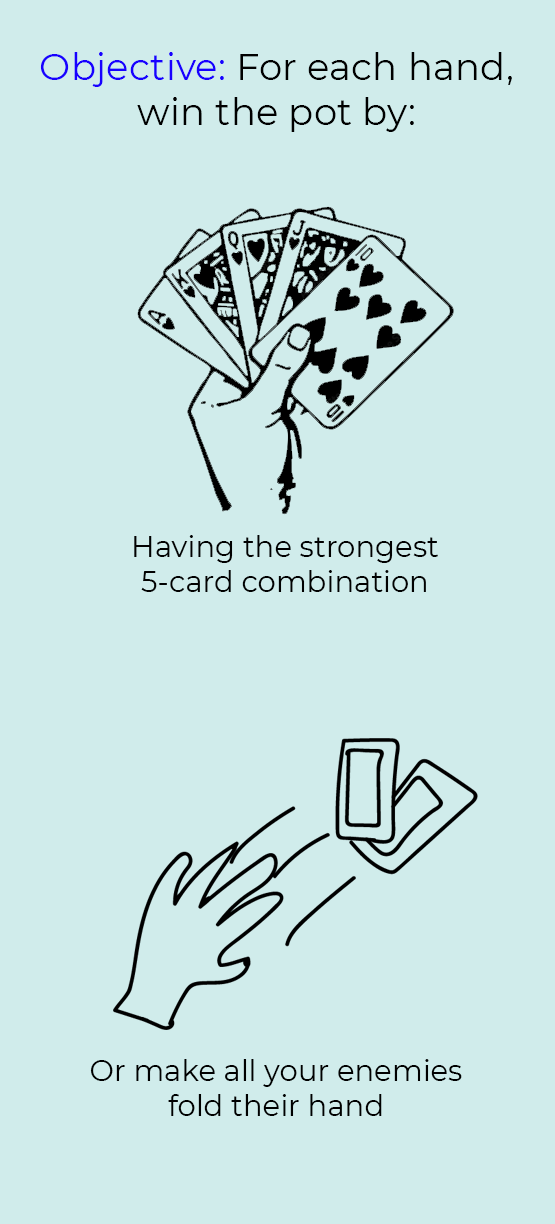
<style>
.page{position:relative;width:555px;height:1224px;background:#d0eceb}
.page>*{position:absolute;margin:0}
.t1{font:37.5px "Montserrat-Regular";color:#000000}
.t2{font:37.5px "Montserrat-Regular";color:#1800ff}
.t3{font:29.2px "Montserrat-Regular";color:#010101}
.t4{font:29.2px "Montserrat-Regular";color:#000000}
</style>
<div class="page">
<p class="t1" style="left:40px;top:52px;width:472px;height:80px;text-align:center"><span class="t2">Objective:</span> For each hand, win the pot by:</p>
<p class="t3" style="left:134px;top:535px;width:304px;height:57px;text-align:center">Having the strongest<br>5-card combination</p>
<p class="t4" style="left:90px;top:1059px;width:372px;height:57px;text-align:center">Or make all your enemies<br>fold their hand</p>
</div>
